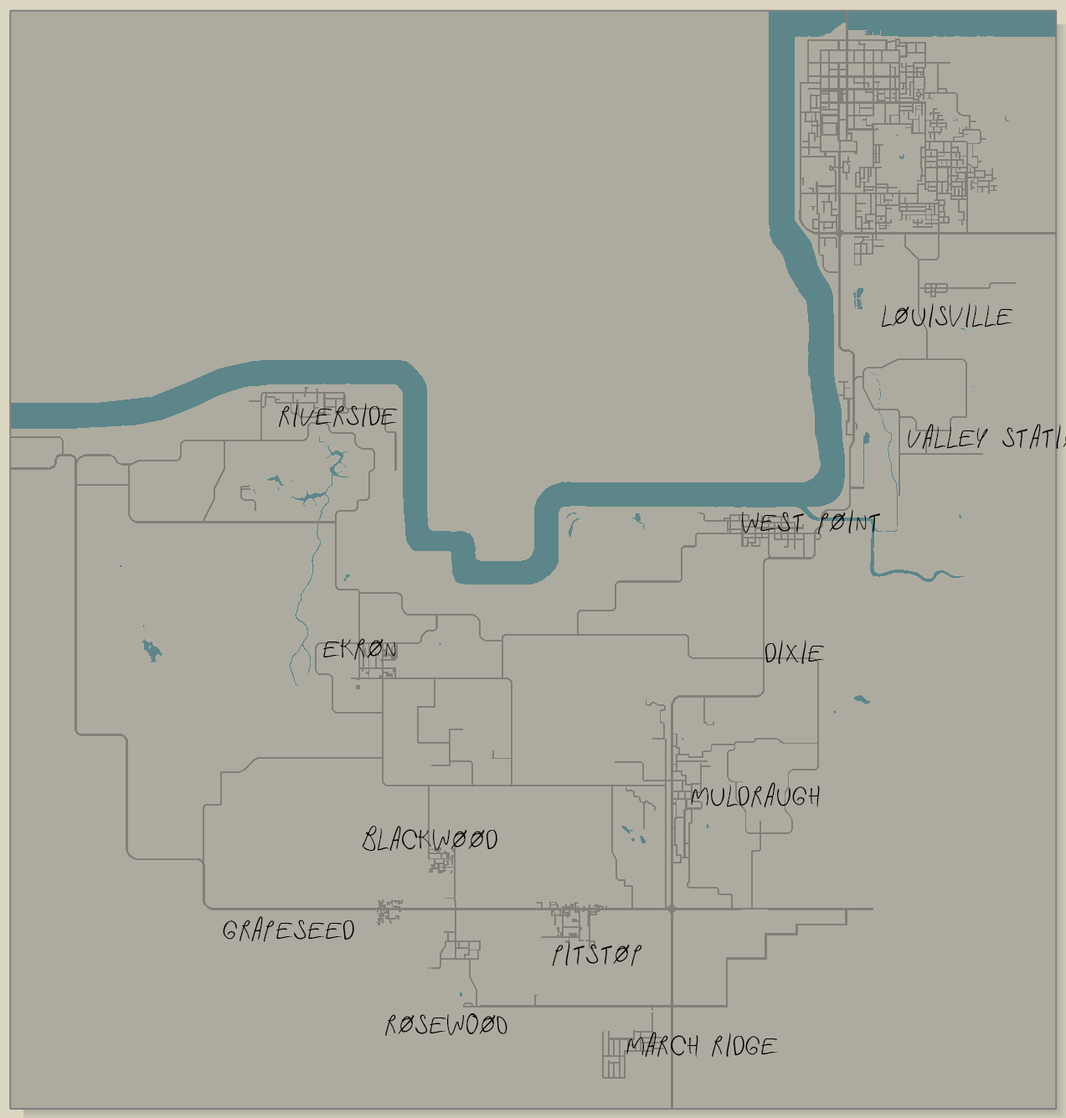
<style>
.page{position:relative;width:1066px;height:1118px;background:#adaba0}
.page>*{position:absolute;margin:0}
.t1{font:30.2px "FastInMyCar";color:#000000}
</style>
<div class="page">
<p class="t1" style="left:882px;top:303px;width:131px;height:25px">louisVille</p>
<p class="t1" style="left:279px;top:403px;width:118px;height:24px">riverside</p>
<p class="t1" style="left:742px;top:509px;width:138px;height:25px">west point</p>
<p class="t1" style="left:323px;top:638px;width:73px;height:22px">ekron</p>
<p class="t1" style="left:765px;top:640px;width:59px;height:24px">dixie</p>
<p class="t1" style="left:691px;top:782px;width:129px;height:25px">muldraugh</p>
<p class="t1" style="left:362px;top:826px;width:136px;height:25px">blackwood</p>
<p class="t1" style="left:223px;top:916px;width:131px;height:26px">grapeseed</p>
<p class="t1" style="left:552px;top:942px;width:90px;height:25px">pitstop</p>
<p class="t1" style="left:385px;top:1014px;width:123px;height:22px">rosew0oD</p>
<p class="t1" style="left:627px;top:1032px;width:150px;height:25px">march ridge</p>
</div>
